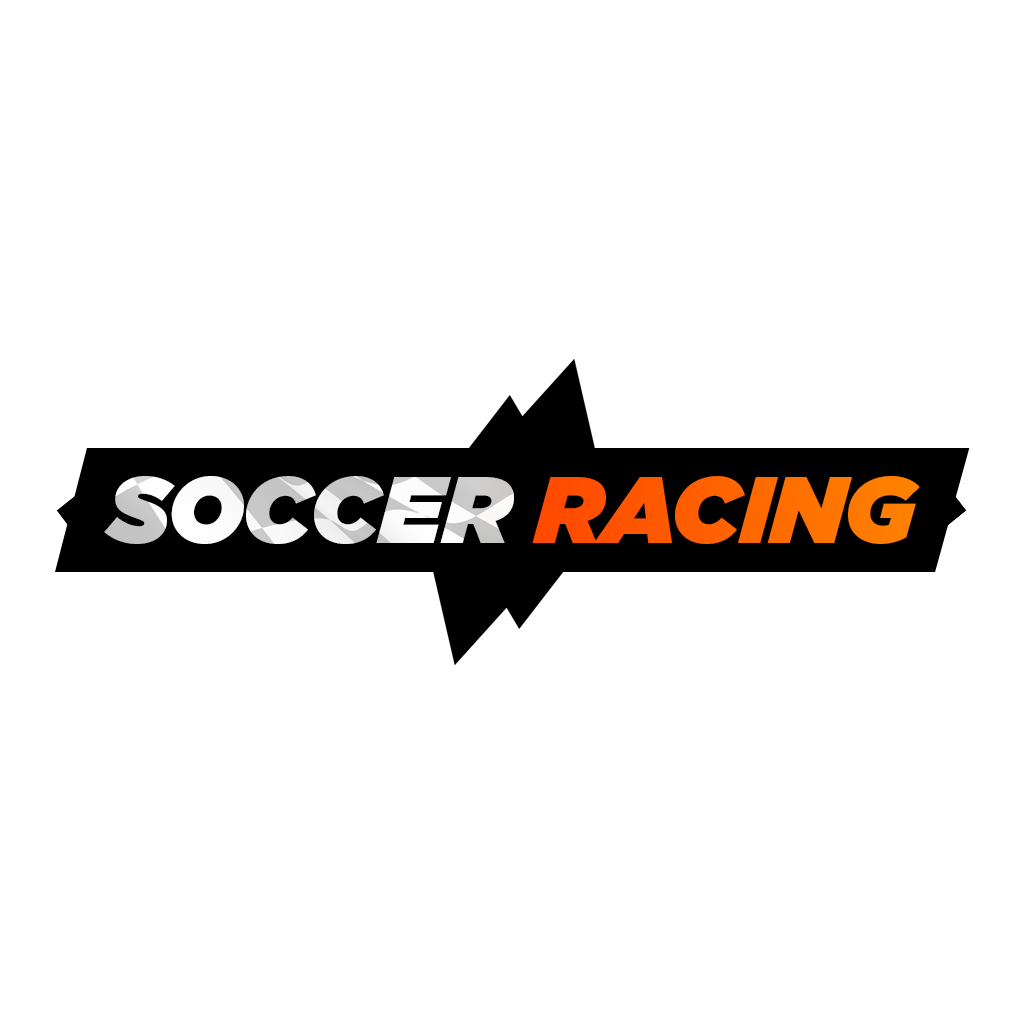
<style>
.page{position:relative;width:1024px;height:1024px;background:#ffffff}
.page>*{position:absolute;margin:0}
.t1{font:94.6px "Gotham-UltraItalic";text-transform:uppercase}
</style>
<div class="page">
<p class="t1" style="left:104px;top:476px;width:816px;height:68px">Soccer RACing</p>
</div>
